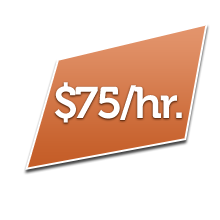
<style>
.page{position:relative;width:220px;height:220px;background:#ffffff}
.page>*{position:absolute;margin:0}
.t1{font:44px "Museo-700";letter-spacing:-0.05em;color:#ffffff}
</style>
<div class="page">
<p class="t1" style="left:54px;top:83px;width:128px;height:41px">$75/hr.</p>
<p class="t1" style="left:54px;top:82px;width:128px;height:41px">$75/hr.</p>
</div>
